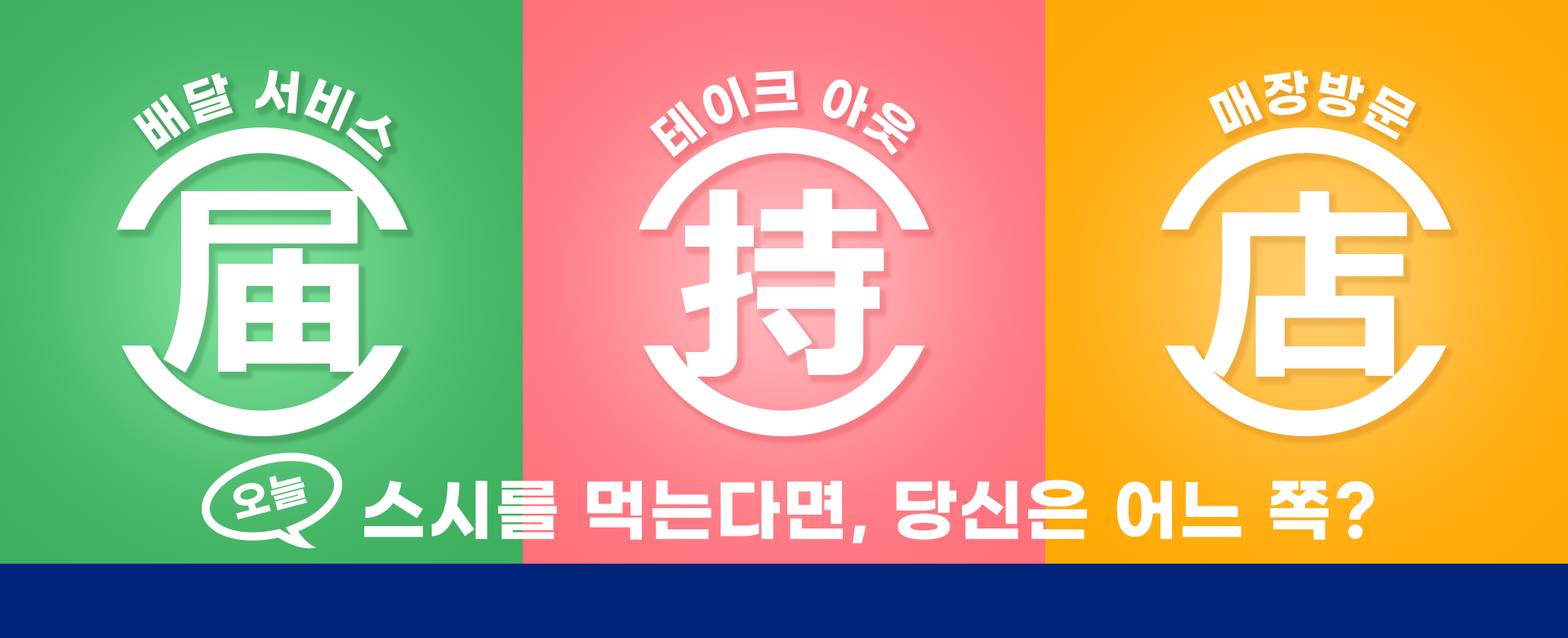
<style>
.page{position:relative;width:1568px;height:638px}
.page>*{position:absolute;margin:0}
.t1{font:49px/36px "GmarketSansBold";letter-spacing:0.024em;color:#ffffff;text-transform:uppercase}
.t2{font:49px "GmarketSansBold";letter-spacing:0.024em;color:#ffffff;text-transform:uppercase}
.t3{font:212.7px "Meiryo-Bold";letter-spacing:0.024em;color:#ffffff;text-transform:uppercase}
.t4{font:39.3px "GmarketSansBold";letter-spacing:0.024em;color:#ffffff;text-transform:uppercase}
.t5{font:67.8px "GmarketSansBold";letter-spacing:0.024em;color:#ffffff;text-transform:uppercase}
</style>
<div class="page">
<p class="t1" style="left:133px;top:69px;width:259px;height:93px">배달 서비스</p>
<p class="t1" style="left:649px;top:70px;width:266px;height:88px">테이크 아웃</p>
<p class="t2" style="left:1208px;top:70px;width:208px;height:70px">매장방문</p>
<p class="t3" style="left:163px;top:191px;width:196px;height:181px">届</p>
<p class="t3" style="left:680px;top:189px;width:204px;height:187px">持</p>
<p class="t3" style="left:1201px;top:191px;width:206px;height:186px">店</p>
<p class="t4" style="left:233px;top:475px;width:74px;height:44px;rotate:-15deg">오늘</p>
<p class="t5" style="left:364px;top:479px;width:1010px;height:64px">스시를 먹는다면, 당신은 어느 쪽?</p>
</div>
